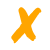
<style>
.page{position:relative;width:50px;height:50px;background:#ffffff}
.page>*{position:absolute;margin:0}
.t1{font:48px "ArialUnicodeMS";color:#ffa500}
</style>
<div class="page">
<p class="t1" style="left:11px;top:7px;width:31px;height:37px">✘</p>
</div>
